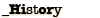
<style>
.page{position:relative;width:100px;height:18px;background:#ffffff}
.page>*{position:absolute;margin:0}
.t1{font:14px "AmericanTypewriter-Bold";color:#000000}
.t2{font:14px "AmericanTypewriter";color:#000000}
</style>
<div class="page">
<p class="t1" style="left:1px;top:4px;width:62px;height:13px"><span class="t2">_</span>Hi<span class="t2">st</span>or<span class="t2">y</span></p>
</div>
